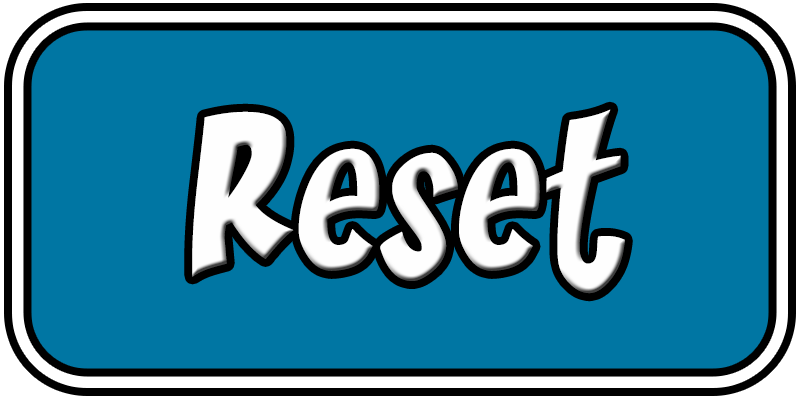
<style>
.page{position:relative;width:800px;height:400px;background:#0076a3}
.page>*{position:absolute;margin:0}
.t1{font:200px "Yikes";color:#fefefe}
</style>
<div class="page">
<p class="t1" style="left:192px;top:109px;width:433px;height:185px">Reset</p>
</div>
